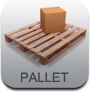
<style>
.page{position:relative;width:90px;height:92px}
.page>*{position:absolute;margin:0}
.t1{font:13px "ArialMT";color:#444444}
</style>
<div class="page">
<p class="t1" style="left:21px;top:72px;width:48px;height:10px">PALLET</p>
</div>
